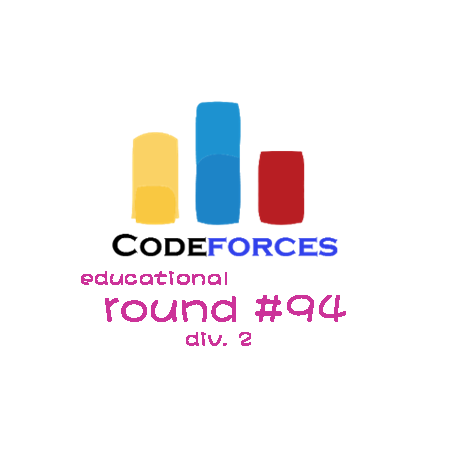
<style>
.page{position:relative;width:454px;height:454px;background:#ffffff}
.page>*{position:absolute;margin:0}
.t1{font:20px "DFPShaoNvW5";letter-spacing:0.02em;color:#cc3399;font-weight:bold}
.t2{font:40px "DFPShaoNvW5";letter-spacing:0.02em;color:#cc3399;font-weight:bold}
</style>
<div class="page">
<p class="t1" style="left:81px;top:271px;width:146px;height:14px">educational</p>
<p class="t2" style="left:105px;top:295px;width:241px;height:27px">round #94</p>
<p class="t1" style="left:186px;top:332px;width:65px;height:14px">div. 2</p>
</div>
